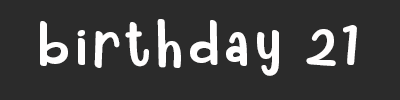
<style>
.page{position:relative;width:400px;height:100px;background:#2b2b2b}
.page>*{position:absolute;margin:0}
.t1{font:56.1px "RoyumBread";letter-spacing:0.1em;color:#fffefe}
</style>
<div class="page">
<p class="t1" style="left:40px;top:19px;width:317px;height:57px">birthday 21</p>
</div>
